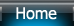
<style>
.page{position:relative;width:74px;height:26px}
.page>*{position:absolute;margin:0}
.t1{font:16px "Tahoma";color:#ffffff}
</style>
<div class="page">
<p class="t1" style="left:16px;top:7px;width:41px;height:13px">Home</p>
</div>
